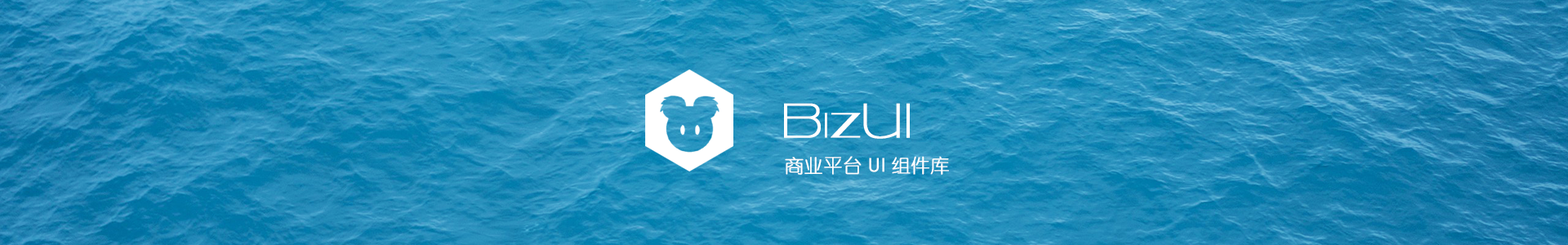
<style>
.page{position:relative;width:1568px;height:245px}
.page>*{position:absolute;margin:0}
.t1{font:33.8px "Kilsonburg-Regular";color:#ffffff;font-weight:bold}
.t2{font:47px "Kilsonburg-Regular";color:#ffffff;font-weight:bold}
.t3{font:18.9px "YouYuan";color:#ffffff;font-weight:bold}
.t4{font:18.9px "CenturyGothic";color:#ffffff;font-weight:bold}
</style>
<div class="page">
<p class="t1" style="left:784px;top:103px;width:126px;height:36px"><span class="t2">B</span>iz<span class="t2">UI</span></p>
<p class="t3" style="left:785px;top:156px;width:164px;height:19px">商业平台<span class="t4"> UI </span>组件库</p>
</div>
